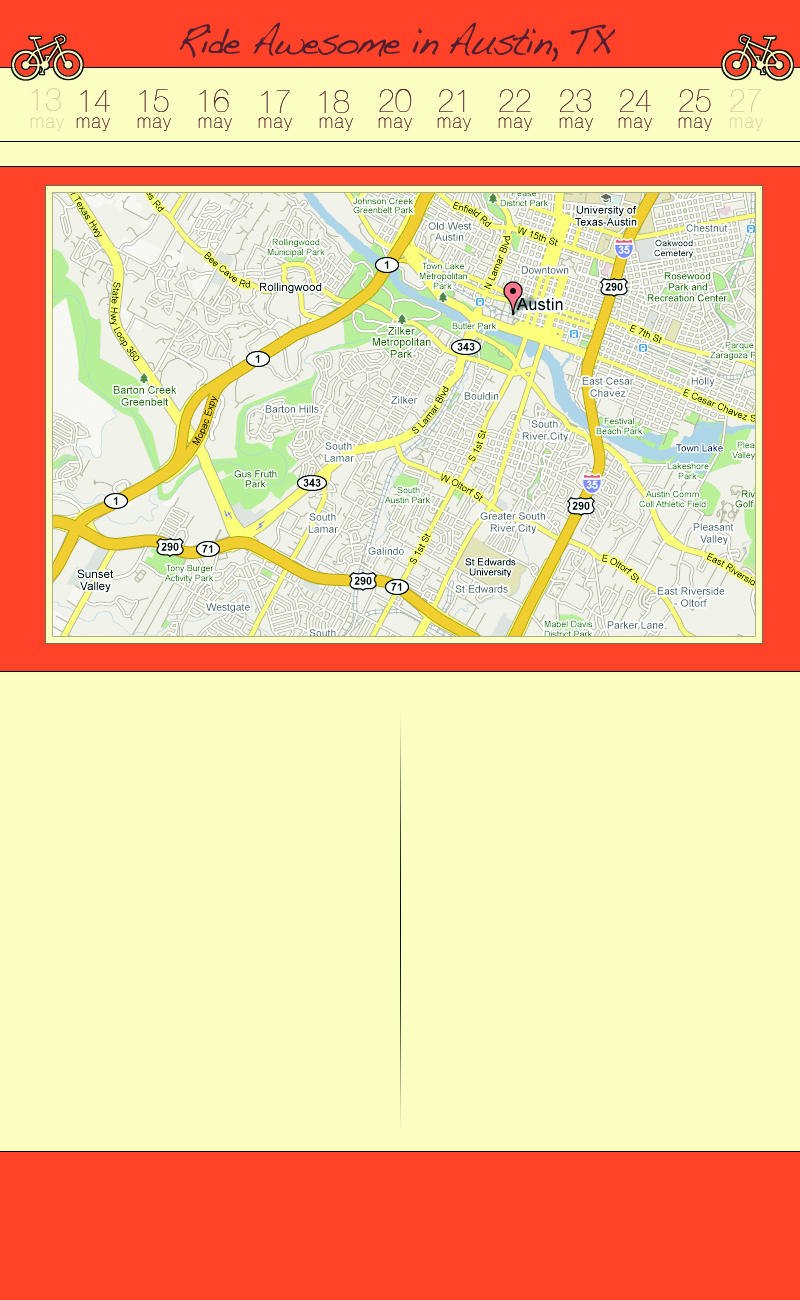
<style>
.page{position:relative;width:800px;height:1300px;background:#fbffc2}
.page>*{position:absolute;margin:0}
.t1{font:39.6px "Handwriting-Dakota";letter-spacing:-0.075em;color:#531f2e;scale:0.91 1}
.t2{font:33px "HelveticaNeue-UltraLight";letter-spacing:0.005em;scale:0.91 1}
.t3{font:33px "HelveticaNeue-UltraLight";letter-spacing:0.005em;color:#531f2e;scale:0.91 1}
.t4{font:19.8px "HelveticaNeue-UltraLight";letter-spacing:0.1em;color:#d4c79e;scale:0.91 1}
.t5{font:19.8px "HelveticaNeue-UltraLight";letter-spacing:0.1em;color:#531f2e;scale:0.91 1}
</style>
<div class="page">
<p class="t1" style="left:179px;top:22px;width:222px;height:36px">Ride Awesome</p>
<p class="t1" style="left:412px;top:22px;width:203px;height:40px">in Austin, TX</p>
<p class="t2" style="left:31px;top:88px;width:30px;height:23px">13</p>
<p class="t3" style="left:139px;top:89px;width:30px;height:23px">15</p>
<p class="t3" style="left:199px;top:89px;width:30px;height:23px">16</p>
<p class="t3" style="left:379px;top:89px;width:33px;height:23px">20</p>
<p class="t3" style="left:439px;top:89px;width:26px;height:23px">21</p>
<p class="t2" style="left:499px;top:89px;width:32px;height:23px">22</p>
<p class="t3" style="left:560px;top:89px;width:32px;height:23px">23</p>
<p class="t3" style="left:620px;top:89px;width:31px;height:23px">24</p>
<p class="t3" style="left:679px;top:89px;width:32px;height:23px">25</p>
<p class="t2" style="left:730px;top:89px;width:31px;height:23px">27</p>
<p class="t3" style="left:80px;top:90px;width:30px;height:22px">14</p>
<p class="t2" style="left:261px;top:90px;width:29px;height:23px">17</p>
<p class="t3" style="left:319px;top:90px;width:30px;height:23px">18</p>
<p class="t4" style="left:30px;top:117px;width:34px;height:14px">may</p>
<p class="t5" style="left:76px;top:117px;width:34px;height:14px">may</p>
<p class="t5" style="left:137px;top:117px;width:34px;height:14px">may</p>
<p class="t5" style="left:198px;top:117px;width:34px;height:14px">may</p>
<p class="t5" style="left:258px;top:117px;width:34px;height:14px">may</p>
<p class="t5" style="left:319px;top:117px;width:34px;height:14px">may</p>
<p class="t5" style="left:378px;top:117px;width:34px;height:14px">may</p>
<p class="t5" style="left:437px;top:117px;width:34px;height:14px">may</p>
<p class="t5" style="left:498px;top:117px;width:34px;height:14px">may</p>
<p class="t5" style="left:559px;top:117px;width:34px;height:14px">may</p>
<p class="t5" style="left:618px;top:117px;width:34px;height:14px">may</p>
<p class="t5" style="left:678px;top:117px;width:34px;height:14px">may</p>
<p class="t4" style="left:729px;top:117px;width:34px;height:14px">may</p>
</div>
